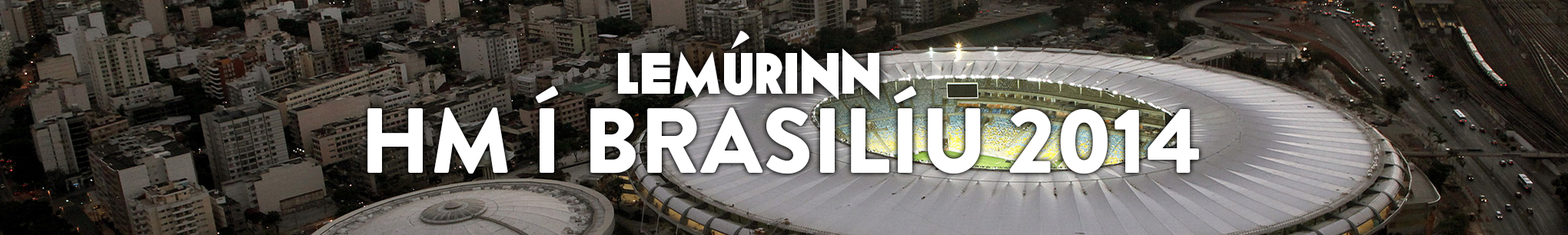
<style>
.page{position:relative;width:1568px;height:235px}
.page>*{position:absolute;margin:0}
.t1{font:57.6px "Geomancy-ExtraBold";color:#ffffff}
.t2{font:92.2px "BrandonGrotesque-Black";color:#ffffff}
</style>
<div class="page">
<p class="t1" style="left:618px;top:31px;width:261px;height:69px">LEMÚrINN</p>
<p class="t2" style="left:367px;top:86px;width:832px;height:88px">HM Í BRASILÍU 2014</p>
</div>
